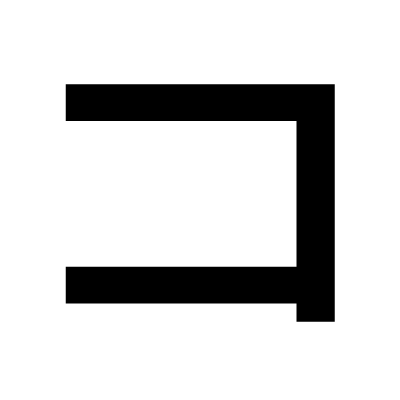
<style>
.page{position:relative;width:400px;height:400px;background:#ffffff}
.page>*{position:absolute;margin:0}
.t1{font:424.8px "MS-PGothic";color:#000000}
</style>
<div class="page">
<p class="t1" style="left:65px;top:84px;width:270px;height:238px">コ</p>
</div>
